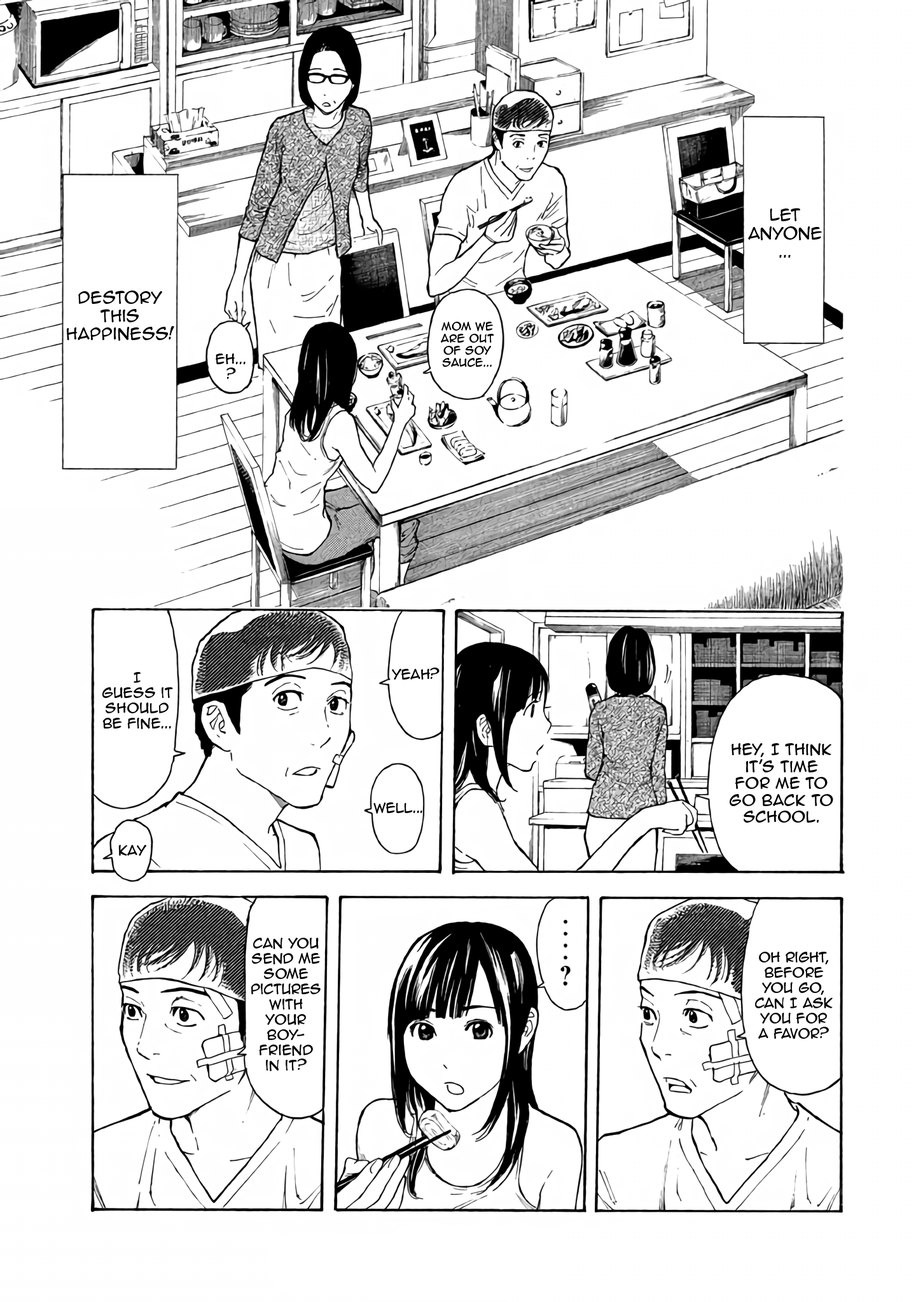
<style>
.page{position:relative;width:916px;height:1302px;background:#ffffff}
.page>*{position:absolute;margin:0}
.t1{font:15.3px "AnimeAce2.0BB";color:#000000}
.t2{font:10.2px "AnimeAce2.0BB";color:#000000}
.t3{font:12.7px "AnimeAce2.0BB";color:#000000}
.t4{font:14px "AnimeAce2.0BB";color:#000000}
</style>
<div class="page">
<p class="t1" style="left:748px;top:208px;width:74px;height:50px;text-align:center">Let anyone...</p>
<p class="t1" style="left:67px;top:291px;width:107px;height:50px;text-align:center">Destory this happiness!</p>
<p class="t2" style="left:441px;top:322px;width:53px;height:45px;text-align:center">mom we are out of soy sauce...</p>
<p class="t3" style="left:216px;top:354px;width:29px;height:25px;text-align:center">Eh...?</p>
<p class="t3" style="left:102px;top:672px;width:71px;height:57px;text-align:center">I <br>guess it should be fine...</p>
<p class="t3" style="left:392px;top:668px;width:47px;height:12px">yeah?</p>
<p class="t4" style="left:729px;top:743px;width:104px;height:80px;text-align:center">Hey, I think it’s time for me to go back to school.</p>
<p class="t3" style="left:373px;top:802px;width:49px;height:12px">well...</p>
<p class="t3" style="left:118px;top:845px;width:29px;height:11px">Kay</p>
<p class="t3" style="left:251px;top:938px;width:69px;height:133px;text-align:center">Can you send me some pictures with  your boy-<br>friend in it?</p>
<p class="t3" style="left:755px;top:952px;width:77px;height:87px;text-align:center">Oh right, before you go, can I ask you for a favor?</p>
</div>
